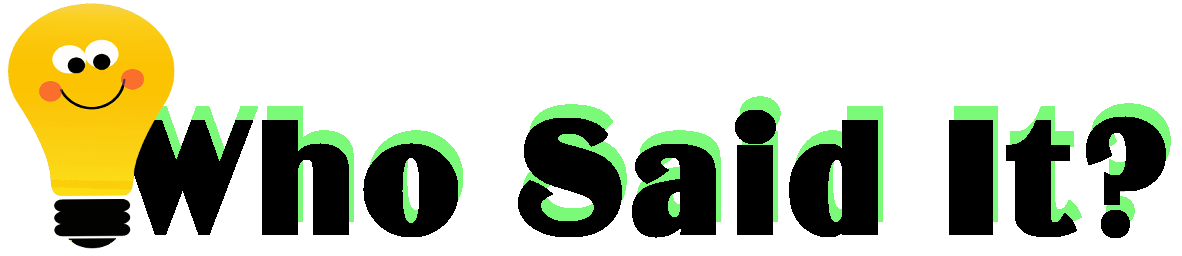
<style>
.page{position:relative;width:1182px;height:256px;background:#ffffff}
.page>*{position:absolute;margin:0}
.t1{font:166.7px "BinnerD";letter-spacing:0.02em;color:#000000;font-weight:bold}
</style>
<div class="page">
<p class="t1" style="left:120px;top:96px;width:1051px;height:129px">Who Said It?</p>
<p class="t1" style="left:115px;top:110px;width:1051px;height:128px">Who Said It?</p>
</div>
